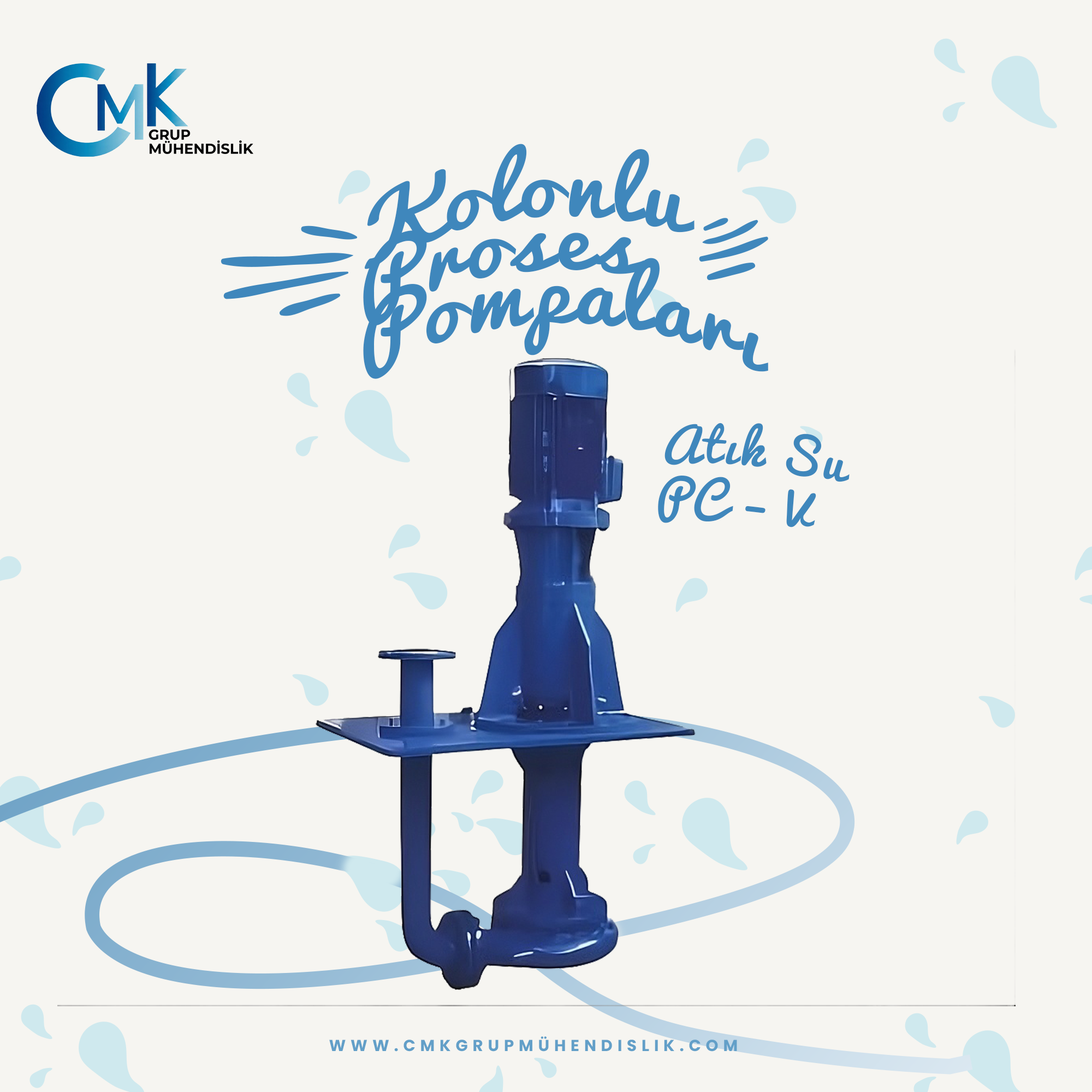
<style>
.page{position:relative;width:1092px;height:1092px;background:#f6f5f1}
.page>*{position:absolute;margin:0}
.t1{font:80px/26.7px "Pacifico-Regular";letter-spacing:0.06em;color:#3f87bc;scale:1.1 1}
.t2{font:46.9px/53.9px "Pacifico-Regular";letter-spacing:0.06em;color:#3f87bc}
.t3{font:16px "Poppins-Bold";letter-spacing:0.3em;color:#629fc8;text-transform:uppercase}
</style>
<div class="page">
<p class="t1" style="left:363px;top:144px;width:405px;height:235px">Kolonlu<br><br>Proses    <br><br>Pompaları</p>
<p class="t2" style="left:658px;top:423px;width:192px;height:104px;rotate:7deg">Atık Su <br>PC – V</p>
<p class="t3" style="left:329px;top:1036px;width:408px;height:16px">www.cmkgrupmühendislik.com</p>
</div>
